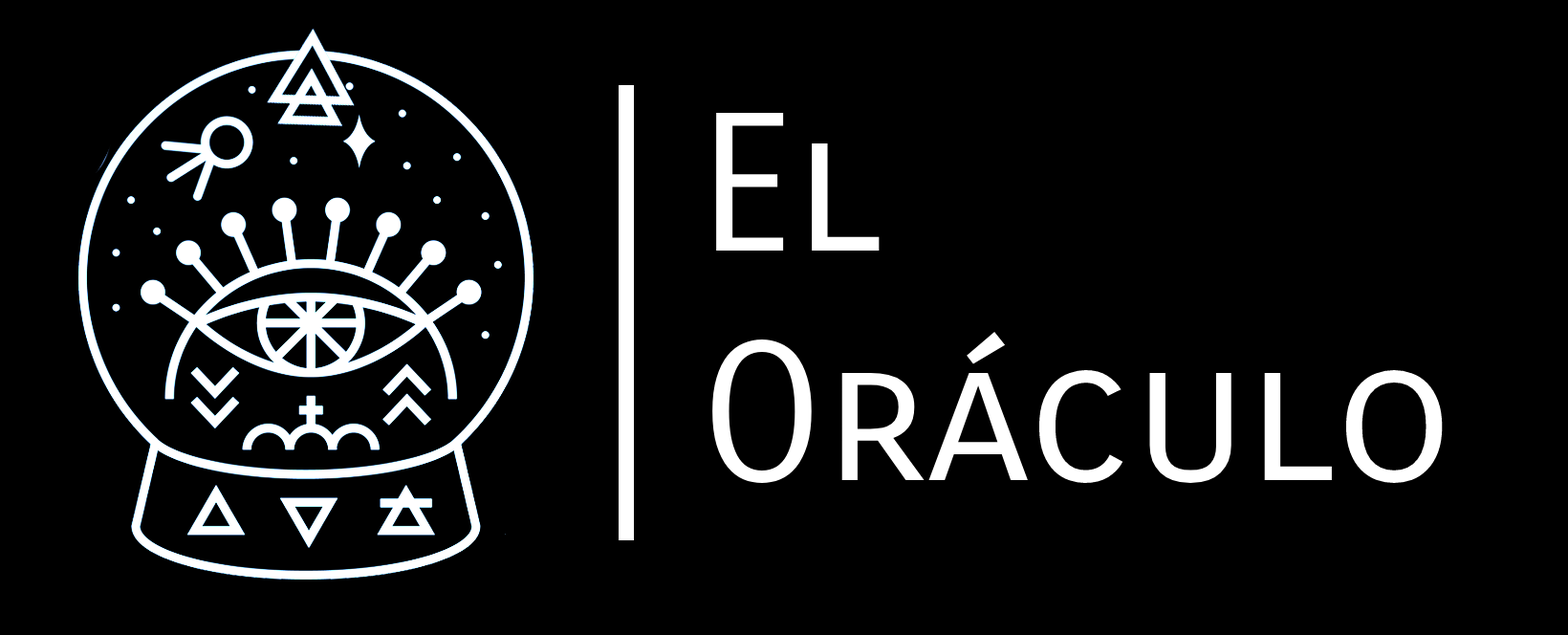
<style>
.page{position:relative;width:1568px;height:635px;background:#000000}
.page>*{position:absolute;margin:0}
.t1{font:191.2px "CarroisGothicSC-Regular";color:#ffffff}
</style>
<div class="page">
<p class="t1" style="left:712px;top:113px;width:731px;height:370px">El<br>Oráculo</p>
</div>
